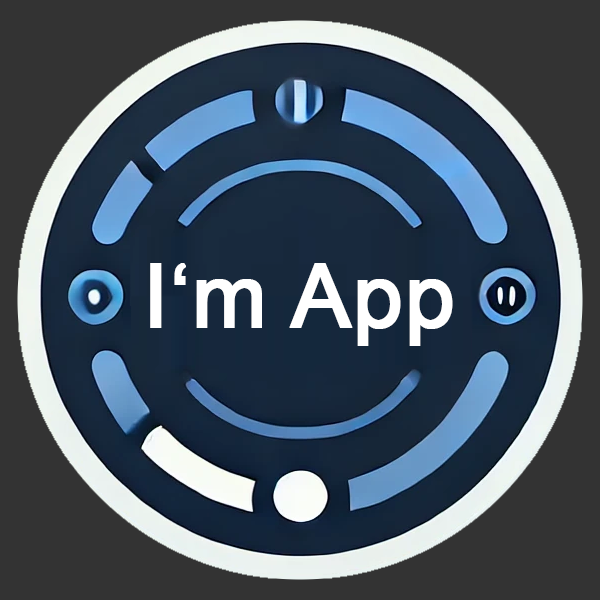
<style>
.page{position:relative;width:600px;height:600px;background:#333333}
.page>*{position:absolute;margin:0}
.t1{font:89px "ArialMT";color:#ffffff;font-weight:bold}
</style>
<div class="page">
<p class="t1" style="left:150px;top:263px;width:303px;height:83px">I‘m App</p>
</div>
